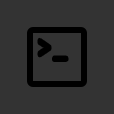
<style>
.page{position:relative;width:114px;height:114px;background:#333333}
.page>*{position:absolute;margin:0}
.t1{font:26.4px "SourceCodePro-Semibold";color:#000000}
</style>
<div class="page">
<p class="t1" style="left:39px;top:39px;width:28px;height:21px">&gt;_</p>
</div>
